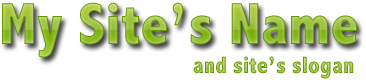
<style>
.page{position:relative;width:366px;height:80px;background:#ffffff}
.page>*{position:absolute;margin:0}
.t1{font:60px "AbadiMT-CondensedExtraBold"}
.t2{font:24px "AbadiMT-CondensedExtraBold"}
</style>
<div class="page">
<p class="t1" style="left:2px;top:2px;width:355px;height:56px">My Site’s Name</p>
<p class="t2" style="left:193px;top:56px;width:161px;height:23px">and site’s slogan</p>
</div>
